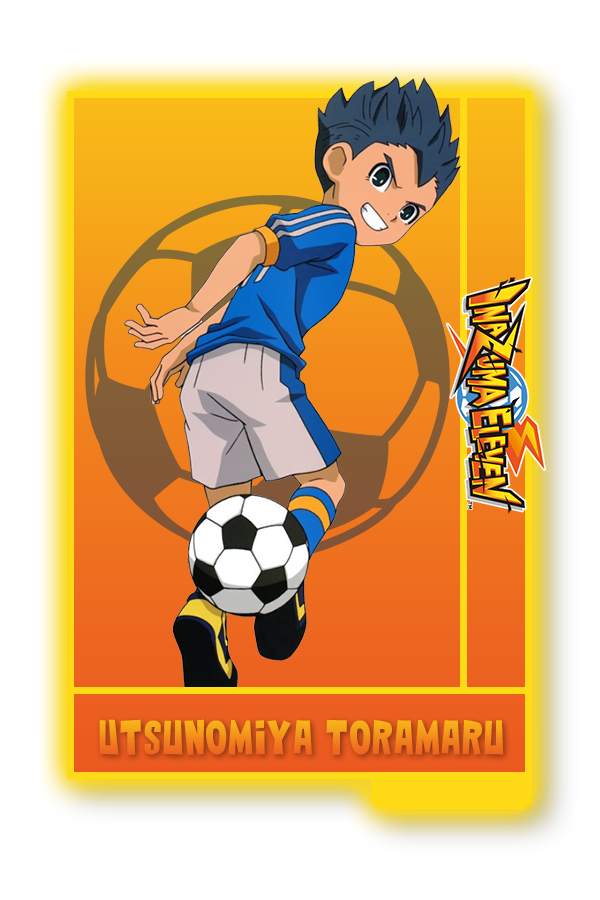
<style>
.page{position:relative;width:600px;height:900px;background:#ffffff}
.page>*{position:absolute;margin:0}
.t1{font:50.5px "TTG-Bold"}
</style>
<div class="page">
<p class="t1" style="left:99px;top:719px;width:405px;height:36px">Utsunomiya Toramaru</p>
</div>
